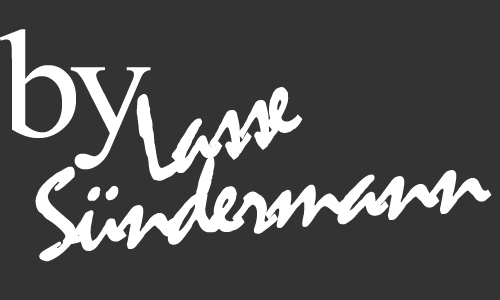
<style>
.page{position:relative;width:500px;height:300px;background:#333333}
.page>*{position:absolute;margin:0}
.t1{font:153.9px "TimesNewRomanPSMT";letter-spacing:-0.07em;color:#ffffff;scale:1.06 1}
.t2{font:124px "Mistral";letter-spacing:-0.07em;color:#ffffff;scale:1.05 1}
.t3{font:123.2px "Mistral";letter-spacing:-0.07em;color:#ffffff;scale:1.06 1}
</style>
<div class="page">
<p class="t1" style="left:0px;top:29px;width:151px;height:141px">by</p>
<p class="t2" style="left:136px;top:87px;width:167px;height:94px;rotate:-18deg">Lasse</p>
<p class="t3" style="left:35px;top:156px;width:457px;height:106px;rotate:-6deg">Sündermann</p>
</div>
